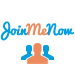
<style>
.page{position:relative;width:75px;height:75px;background:#ffffff}
.page>*{position:absolute;margin:0}
.t1{font:14px "Pacifico-Regular";color:#049fdc}
.t2{font:14px "Pacifico-Regular";color:#ec8a5b}
</style>
<div class="page">
<p class="t1" style="left:0px;top:21px;width:74px;height:20px">Join<span class="t2">Me</span>Now</p>
</div>
